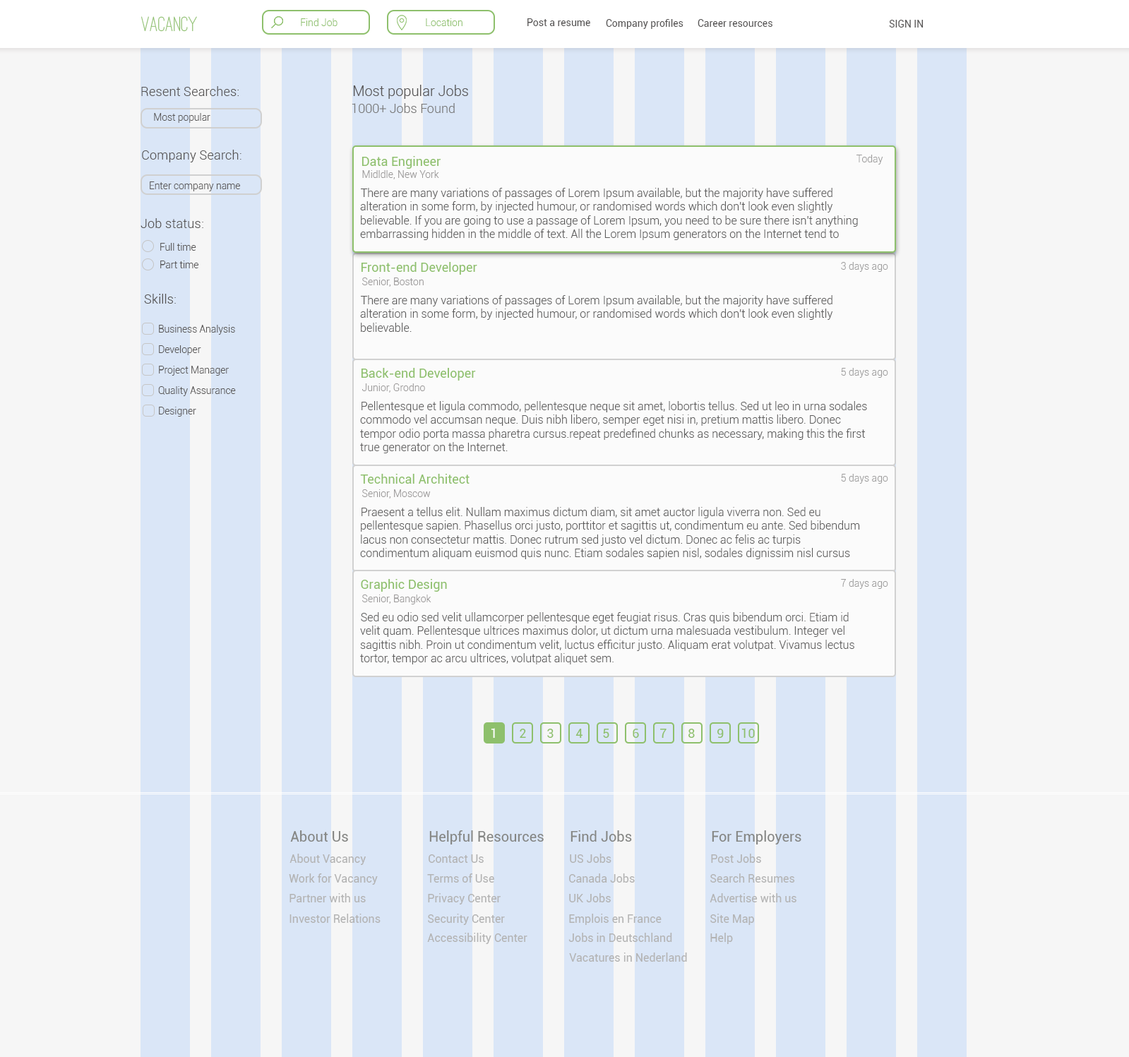
<style>
.page{position:relative;width:1129px;height:1057px;background:#f6f6f6}
.page>*{position:absolute;margin:0}
.t1{font:21.2px "OstrichSans-Medium";color:#8ec06c}
.t2{font:9.9px "Roboto-Light";color:#8ec06c}
.t3{font:9.9px "Roboto-Regular";color:#565454}
.t4{font:13px "Roboto-Light";color:#565454}
.t5{font:14.1px "Roboto-Light";color:#565454}
.t6{font:9.8px "Roboto-Light";color:#565454}
.t7{font:12.7px "Roboto-Light";color:#787878}
.t8{font:12.7px "Roboto-Regular";color:#8ec06c}
.t9{font:9.9px "Roboto-Light";color:#9c9b9b}
.t10{font:9.9px "Roboto-Light";color:#999797}
.t11{font:11.3px "Roboto-Light";color:#5d5c5c}
.t12{font:11.3px "Roboto-Light";color:#787878}
.t13{font:12.7px "Roboto-Regular";color:#ffffff}
.t14{font:14.1px "Roboto-Regular";color:#858684}
.t15{font:11.3px "Roboto-Regular";color:#b3b3b3}
</style>
<div class="page">
<p class="t1" style="left:141px;top:16px;width:56px;height:16px">VACANCY</p>
<p class="t2" style="left:301px;top:18px;width:36px;height:8px">Find Job</p>
<p class="t2" style="left:426px;top:18px;width:36px;height:8px">Location</p>
<p class="t3" style="left:527px;top:18px;width:63px;height:8px">Post a resume</p>
<p class="t3" style="left:606px;top:19px;width:77px;height:10px">Company profiles</p>
<p class="t3" style="left:697px;top:19px;width:75px;height:8px">Career resources</p>
<p class="t3" style="left:889px;top:20px;width:34px;height:8px">SIGN IN</p>
<p class="t4" style="left:141px;top:86px;width:98px;height:10px">Resent Searches:</p>
<p class="t5" style="left:353px;top:85px;width:115px;height:14px">Most popular Jobs</p>
<p class="t6" style="left:154px;top:113px;width:56px;height:10px">Most popular</p>
<p class="t7" style="left:351px;top:103px;width:104px;height:10px">1000+ Jobs Found</p>
<p class="t4" style="left:142px;top:150px;width:99px;height:12px">Company Search:</p>
<p class="t8" style="left:361px;top:156px;width:79px;height:13px">Data Engineer</p>
<p class="t9" style="left:856px;top:155px;width:27px;height:9px">Today</p>
<p class="t10" style="left:362px;top:170px;width:77px;height:9px">Midldle, New York</p>
<p class="t6" style="left:150px;top:181px;width:90px;height:10px">Enter company name</p>
<p class="t11" style="left:360px;top:188px;width:498px;height:52px">There are many variations of passages of Lorem Ipsum available, but the majority have suffered alteration in some form, by injected humour, or randomised words which don't look even slightly believable. If you are going to use a passage of Lorem Ipsum, you need to be sure there isn't anything embarrassing hidden in the middle of text. All the Lorem Ipsum generators on the Internet tend to repeat predefined chunks as necessary, making this the first true generator on the Internet. It uses a <span class="t12">dictionary of over 200 Latin words, combined with a handful of model sentence structures, to generate</span></p>
<p class="t4" style="left:140px;top:218px;width:63px;height:10px">Job status:</p>
<p class="t6" style="left:160px;top:243px;width:36px;height:8px">Full time</p>
<p class="t6" style="left:160px;top:260px;width:38px;height:8px">Part time</p>
<p class="t8" style="left:361px;top:262px;width:116px;height:13px">Front-end Developer</p>
<p class="t9" style="left:841px;top:262px;width:47px;height:10px">3 days ago</p>
<p class="t10" style="left:362px;top:277px;width:61px;height:10px">Senior, Boston</p>
<p class="t4" style="left:144px;top:294px;width:32px;height:9px">Skills:</p>
<p class="t11" style="left:360px;top:295px;width:473px;height:37px">There are many variations of passages of Lorem Ipsum available, but the majority have suffered alteration in some form, by injected humour, or randomised words which don't look even slightly believable.</p>
<p class="t6" style="left:159px;top:325px;width:76px;height:10px">Business Analysis</p>
<p class="t6" style="left:159px;top:345px;width:42px;height:10px">Developer</p>
<p class="t6" style="left:159px;top:366px;width:70px;height:9px">Project Manager</p>
<p class="t8" style="left:361px;top:368px;width:115px;height:12px">Back-end Developer</p>
<p class="t9" style="left:841px;top:368px;width:47px;height:10px">5 days ago</p>
<p class="t6" style="left:158px;top:386px;width:78px;height:10px">Quality Assurance</p>
<p class="t10" style="left:362px;top:383px;width:63px;height:9px">Junior, Grodno</p>
<p class="t11" style="left:360px;top:401px;width:507px;height:52px">Pellentesque et ligula commodo, pellentesque neque sit amet, lobortis tellus. Sed ut leo in urna sodales commodo vel accumsan neque. Duis nibh libero, semper eget nisi in, pretium mattis libero. Donec tempor odio porta massa pharetra cursus.repeat predefined chunks as necessary, making this the first true generator on the Internet.</p>
<p class="t6" style="left:159px;top:407px;width:37px;height:9px">Designer</p>
<p class="t8" style="left:360px;top:474px;width:109px;height:9px">Technical Architect</p>
<p class="t9" style="left:841px;top:474px;width:47px;height:9px">5 days ago</p>
<p class="t10" style="left:362px;top:489px;width:69px;height:9px">Senior, Moscow</p>
<p class="t11" style="left:360px;top:507px;width:500px;height:52px">Praesent a tellus elit. Nullam maximus dictum diam, sit amet auctor ligula viverra non. Sed eu pellentesque sapien. Phasellus orci justo, porttitor et sagittis ut, condimentum eu ante. Sed bibendum lacus non consectetur mattis. Donec rutrum sed justo vel dictum. Donec ac felis ac turpis condimentum aliquam euismod quis nunc. Etiam sodales sapien nisl, sodales dignissim nisl cursus porttitor. Aliquam porttitor pretium cursusrepeat predefined chunks as necessary, making this the first true generator on the Internet. It uses a <span class="t12">dictionary of over 200 Latin words, combined with a handful of model sentence structures, to generate</span></p>
<p class="t8" style="left:361px;top:579px;width:86px;height:12px">Graphic Design</p>
<p class="t9" style="left:841px;top:579px;width:47px;height:10px">7 days ago</p>
<p class="t10" style="left:362px;top:594px;width:69px;height:10px">Senior, Bangkok</p>
<p class="t11" style="left:360px;top:612px;width:494px;height:52px">Sed eu odio sed velit ullamcorper pellentesque eget feugiat risus. Cras quis bibendum orci. Etiam id velit quam. Pellentesque ultrices maximus dolor, ut dictum urna malesuada vestibulum. Integer vel sagittis nibh. Proin ut condimentum velit, luctus efficitur justo. Aliquam erat volutpat. Vivamus lectus tortor, tempor ac arcu ultrices, volutpat aliquet sem.<br><br>Aenean lorem o</p>
<p class="t13" style="left:491px;top:728px;width:4px;height:10px">1</p>
<p class="t8" style="left:519px;top:728px;width:7px;height:10px">2</p>
<p class="t8" style="left:547px;top:728px;width:6px;height:10px">3</p>
<p class="t8" style="left:575px;top:728px;width:7px;height:10px">4</p>
<p class="t8" style="left:603px;top:728px;width:6px;height:10px">5</p>
<p class="t8" style="left:632px;top:728px;width:7px;height:10px">6</p>
<p class="t8" style="left:660px;top:728px;width:6px;height:10px">7</p>
<p class="t8" style="left:688px;top:728px;width:7px;height:10px">8</p>
<p class="t8" style="left:717px;top:728px;width:6px;height:10px">9</p>
<p class="t8" style="left:741px;top:728px;width:14px;height:10px">10</p>
<p class="t14" style="left:290px;top:830px;width:58px;height:11px">About Us</p>
<p class="t14" style="left:429px;top:830px;width:114px;height:14px">Helpful Resources</p>
<p class="t14" style="left:570px;top:830px;width:62px;height:11px">Find Jobs</p>
<p class="t14" style="left:711px;top:830px;width:90px;height:14px">For Employers</p>
<p class="t15" style="left:289px;top:853px;width:77px;height:12px">About Vacancy</p>
<p class="t15" style="left:428px;top:854px;width:55px;height:8px">Contact Us</p>
<p class="t15" style="left:570px;top:853px;width:41px;height:9px">US Jobs</p>
<p class="t15" style="left:711px;top:853px;width:50px;height:9px">Post Jobs</p>
<p class="t15" style="left:289px;top:873px;width:89px;height:11px">Work for Vacancy</p>
<p class="t15" style="left:427px;top:873px;width:67px;height:9px">Terms of Use</p>
<p class="t15" style="left:569px;top:873px;width:66px;height:9px">Canada Jobs</p>
<p class="t15" style="left:710px;top:873px;width:85px;height:9px">Search Resumes</p>
<p class="t15" style="left:289px;top:893px;width:77px;height:9px">Partner with us</p>
<p class="t15" style="left:428px;top:893px;width:72px;height:11px">Privacy Center</p>
<p class="t15" style="left:569px;top:893px;width:42px;height:9px">UK Jobs</p>
<p class="t15" style="left:709px;top:893px;width:87px;height:9px">Advertise with us</p>
<p class="t15" style="left:289px;top:913px;width:91px;height:9px">Investor Relations</p>
<p class="t15" style="left:428px;top:913px;width:77px;height:12px">Security Center</p>
<p class="t15" style="left:569px;top:913px;width:92px;height:12px">Emplois en France</p>
<p class="t15" style="left:710px;top:913px;width:44px;height:12px">Site Map</p>
<p class="t15" style="left:427px;top:932px;width:100px;height:12px">Accessibility Center</p>
<p class="t15" style="left:568px;top:932px;width:104px;height:10px">Jobs in Deutschland</p>
<p class="t15" style="left:710px;top:932px;width:23px;height:12px">Help</p>
<p class="t15" style="left:569px;top:952px;width:118px;height:9px">Vacatures in Nederland</p>
</div>
